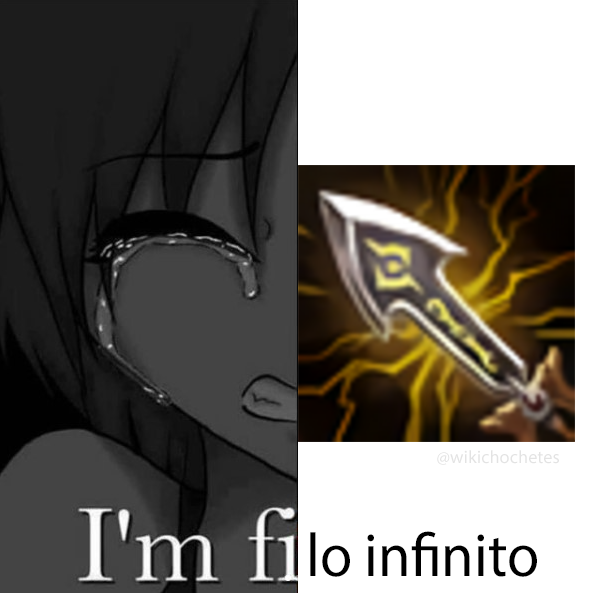
<style>
.page{position:relative;width:592px;height:593px;background:#ffffff}
.page>*{position:absolute;margin:0}
.t1{font:18.1px "MyriadPro-Regular";color:#e3e3e3}
.t2{font:61.5px "MyriadPro-Regular";color:#000000;scale:0.96 1}
</style>
<div class="page">
<p class="t1" style="left:437px;top:450px;width:122px;height:15px">@wikichochetes</p>
<p class="t2" style="left:310px;top:531px;width:227px;height:46px">lo infinito</p>
</div>
